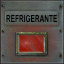
<style>
.page{position:relative;width:64px;height:64px}
.page>*{position:absolute;margin:0}
.t1{font:9.8px "Arial-BoldMT";color:#000000;text-transform:uppercase;scale:0.67 1}
</style>
<div class="page">
<p class="t1" style="left:6px;top:15px;width:51px;height:7px">REFRIGERANTE</p>
</div>
